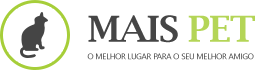
<style>
.page{position:relative;width:272px;height:70px;background:#ffffff}
.page>*{position:absolute;margin:0}
.t1{font:36px "LucidaBright-Demi";letter-spacing:-0.025em;color:#454545;text-transform:uppercase}
.t2{font:36px "LucidaBright-Demi";letter-spacing:-0.025em;color:#b4d557;text-transform:uppercase}
.t3{font:8px "LeelawadeeUI";letter-spacing:-0.025em;color:#454545;text-transform:uppercase}
</style>
<div class="page">
<p class="t1" style="left:88px;top:15px;width:167px;height:28px">Mais <span class="t2">pet</span></p>
<p class="t3" style="left:87px;top:53px;width:167px;height:7px">O MELHOR LUGAR PARA O SEU MELHOR AMIGO</p>
</div>
